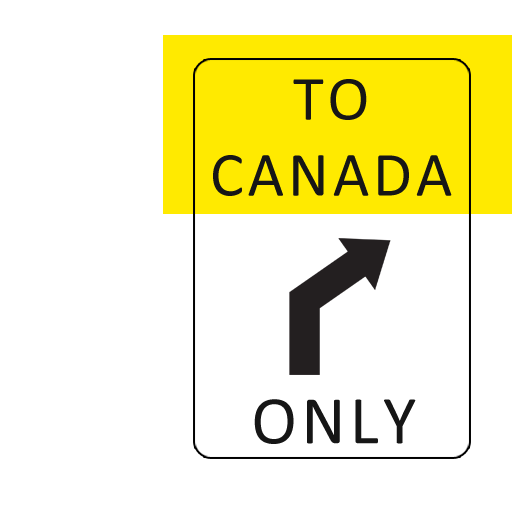
<style>
.page{position:relative;width:512px;height:512px;background:#ffffff}
.page>*{position:absolute;margin:0}
.t1{font:63.3px "Calibri";letter-spacing:0.06em;color:#161616}
.t2{font:68.9px "Calibri";letter-spacing:0.06em;color:#161616}
</style>
<div class="page">
<p class="t1" style="left:213px;top:79px;width:239px;height:117px;text-align:center">TO<br>CANADA</p>
<p class="t2" style="left:254px;top:399px;width:162px;height:45px">ONLY</p>
</div>
